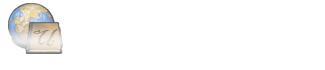
<style>
.page{position:relative;width:325px;height:70px;background:#ffffff}
.page>*{position:absolute;margin:0}
.t1{font:24px "BlackadderITC-Regular"}
</style>
<div class="page">
<p class="t1" style="left:33px;top:29px;width:25px;height:17px">U</p>
</div>
